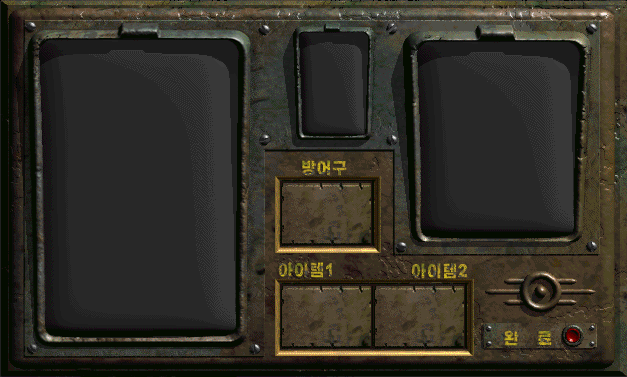
<style>
.page{position:relative;width:627px;height:377px;background:#282828}
.page>*{position:absolute;margin:0}
.t1{font:16px "HakgyoansimPosterB"}
</style>
<div class="page">
<p class="t1" style="left:302px;top:160px;width:45px;height:16px">방어구</p>
<p class="t1" style="left:278px;top:262px;width:54px;height:16px">아이템1</p>
<p class="t1" style="left:411px;top:263px;width:56px;height:16px">아이템2</p>
<p class="t1" style="left:504px;top:330px;width:48px;height:16px">완     료</p>
</div>
